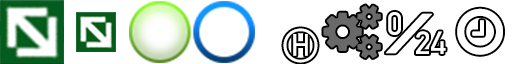
<style>
.page{position:relative;width:512px;height:64px;background:#ffffff}
.page>*{position:absolute;margin:0}
.t1{font:32.1px "Gidole-Regular";color:#ffffff;font-weight:bold}
.t2{font:32.1px "Gidole-Regular";letter-spacing:-0.64em;color:#ffffff;font-weight:bold}
.t3{font:44px "Gidole-Regular";letter-spacing:-0.16em;color:#ffffff;font-weight:bold;scale:3.44 1}
.t4{font:79px "SegoeUISymbol";color:#fffffe;font-weight:bold}
.t5{font:55px "Gidole-Regular";color:#fffffe;font-weight:bold}
</style>
<div class="page">
<p class="t1" style="left:385px;top:12px;width:61px;height:42px"><span class="t2">0</span><span class="t3">/</span>24</p>
<p class="t4" style="left:283px;top:28px;width:35px;height:35px">⃝ <span class="t5">H</span></p>
</div>
